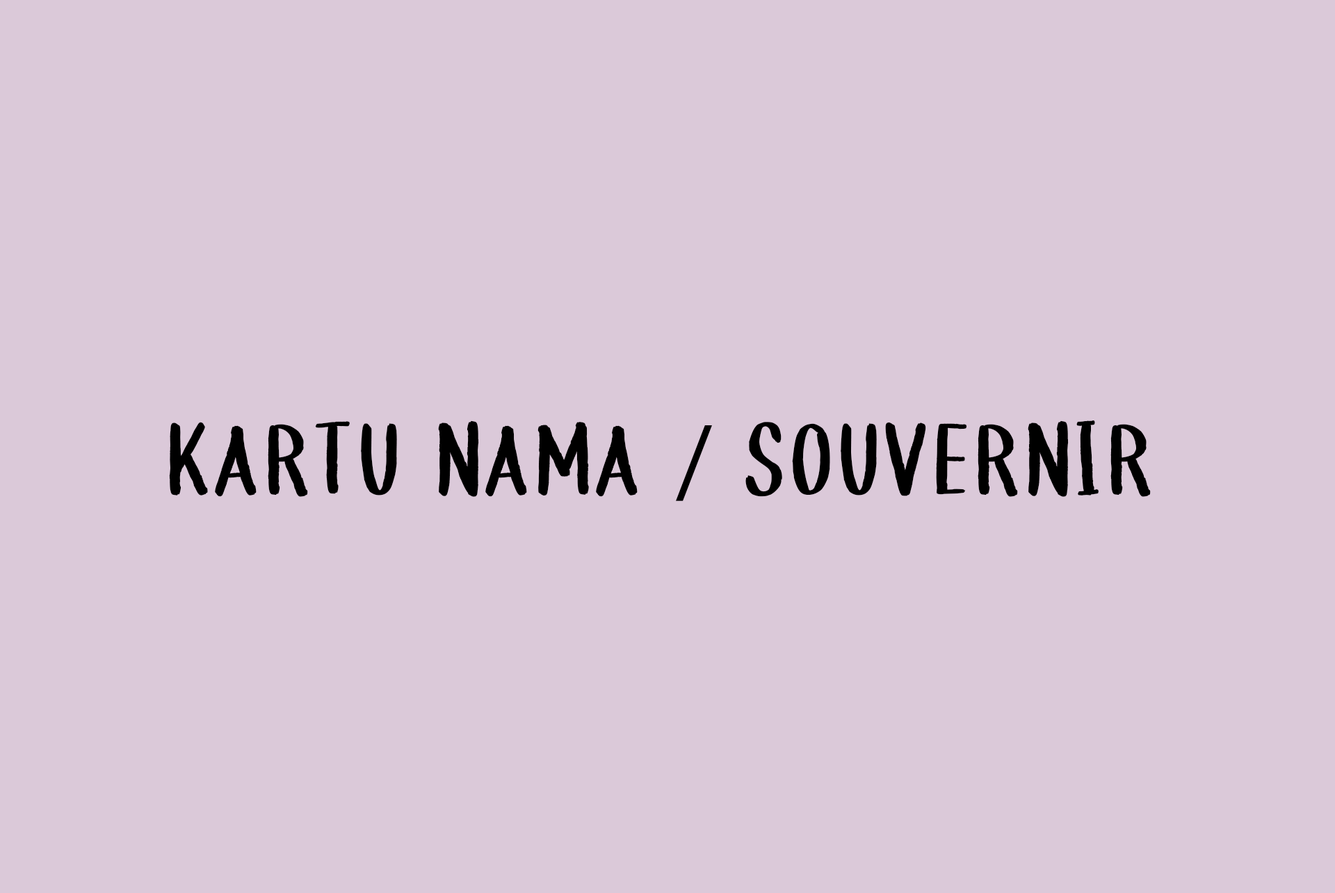
<style>
.page{position:relative;width:1335px;height:893px;background:#dbc9d9}
.page>*{position:absolute;margin:0}
.t1{font:104.3px "BeachHouse";color:#000000}
.t2{font:104.3px "MyriadPro-Regular";color:#000000}
</style>
<div class="page">
<p class="t1" style="left:169px;top:420px;width:982px;height:81px">KARTU NAMA <span class="t2">/</span> SOUVERNIR</p>
</div>
